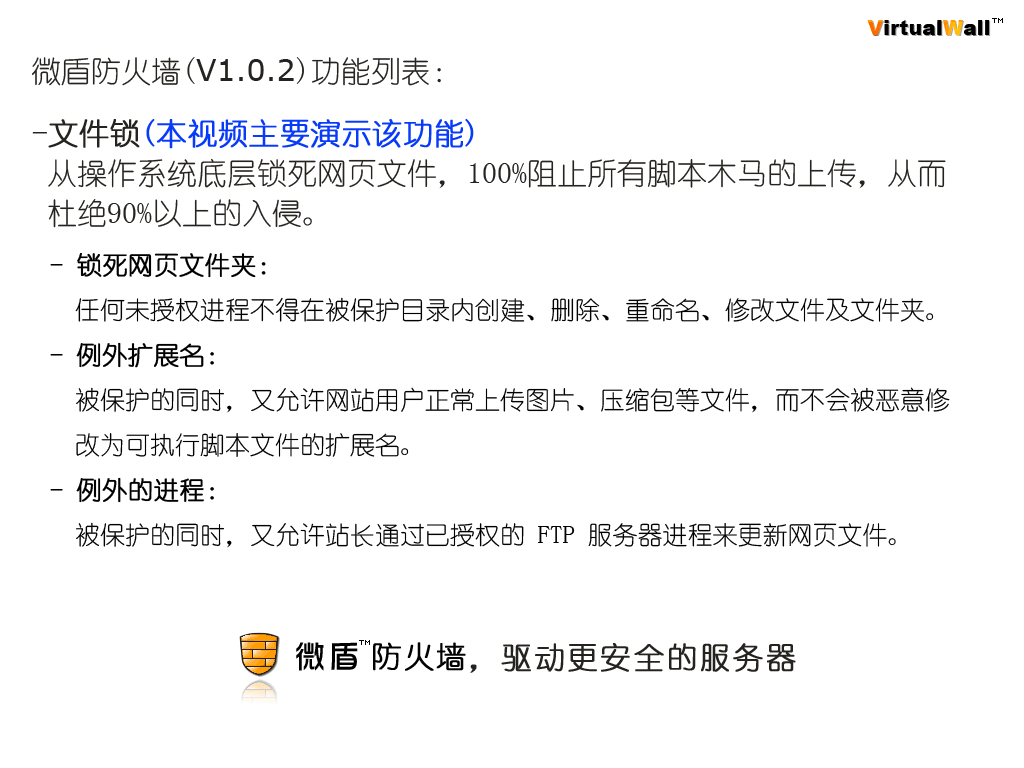
<style>
.page{position:relative;width:1024px;height:768px;background:#ffffff}
.page>*{position:absolute;margin:0}
.t1{font:30px "YouYuan";color:#25231f}
.t2{font:30px "Verdana";color:#25231f}
.t3{font:30px/40px "YouYuan"}
.t4{font:30px/40px "YouYuan";font-weight:bold}
.t5{font:25px/45px "YouYuan";color:#000000}
.t6{font:25px/45px "YouYuan";color:#000000;font-weight:bold}
.t7{font:30px "YouYuan";letter-spacing:0.075em;color:#25231f;font-weight:bold}
</style>
<div class="page">
<p class="t1" style="left:32px;top:57px;width:409px;height:29px">微盾防火墙(<span class="t2">V1.0.2</span>)功能列表：</p>
<p class="t3" style="left:32px;top:119px;width:914px;height:389px"><span class="t4">-文件锁</span><span class="t4">(本视频主要演示该功能)<br></span> 从操作系统底层锁死网页文件，100%阻止所有脚本木马的上传，从而<br> 杜绝90%以上的入侵。<br><br><span class="t4">-远程桌面安全<br></span> 通过限制登录者的计算机名，为服务器多加了一把安全锁。最直接有<br> 效的安全措施。<br><br><span class="t4">-域名白名单<br></span> 限制未授权域名访问服务器。</p>
<p class="t5" style="left:50px;top:253px;width:900px;height:295px"><span class="t6">- 锁死网页文件夹：<br></span>  任何未授权进程不得在被保护目录内创建、删除、重命名、修改文件及文件夹。<br><span class="t6">- 例外扩展名：<br></span>  被保护的同时，又允许网站用户正常上传图片、压缩包等文件，而不会被恶意修<br>  改为可执行脚本文件的扩展名。<br><span class="t6">- 例外的进程：<br></span>  被保护的同时，又允许站长通过已授权的 FTP 服务器进程来更新网页文件。</p>
<p class="t7" style="left:470px;top:643px;width:326px;height:30px">，驱动更安全的服务器</p>
</div>
